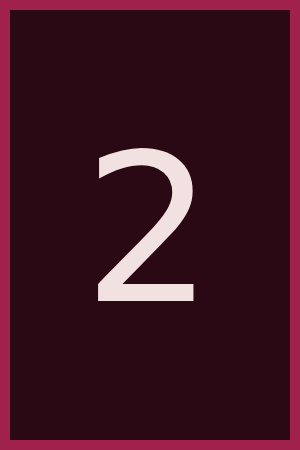
<style>
.page{position:relative;width:300px;height:450px;background:#2a0914}
.page>*{position:absolute;margin:0}
.t1{font:206px "DejaVuSans";color:#f2e1e1}
</style>
<div class="page">
<p class="t1" style="left:98px;top:148px;width:96px;height:153px">2</p>
</div>
